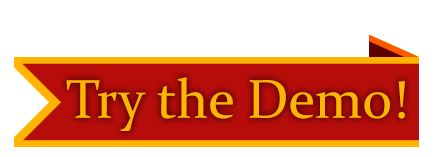
<style>
.page{position:relative;width:437px;height:157px;background:#ffffff}
.page>*{position:absolute;margin:0}
.t1{font:55.1px "Constantia";color:#feb403}
</style>
<div class="page">
<p class="t1" style="left:66px;top:77px;width:339px;height:54px">Try the Demo!</p>
</div>
